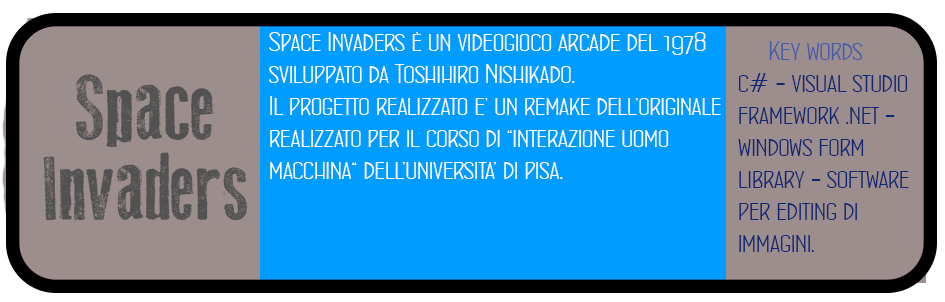
<style>
.page{position:relative;width:945px;height:302px;background:#009cff}
.page>*{position:absolute;margin:0}
.t1{font:26.7px "ConcursoItalianBTNWide";color:#ffffff}
.t2{font:26.7px "ConcursoItalianBTNWide";color:#112672}
.t3{font:26.7px "ConcursoItalianBTNWide";color:#455baa}
.t4{font:93.3px "OldPress";color:#525252}
.t5{font:80px "ConcursoItalianBTNWide";color:#525252}
</style>
<div class="page">
<p class="t1" style="left:269px;top:32px;width:452px;height:147px">Space Invaders è un videogioco arcade del 1978<br>sviluppato da Toshihiro Nishikado. <br>Il progetto realizzato e’ un remake dell’originale <br>realizzato per il corso di “interazione uomo <br>macchina“ dell’universita’ di pisa.</p>
<p class="t2" style="left:738px;top:41px;width:171px;height:211px"><span class="t3">     Key words<br></span>c# - visual studio<br>framework .net -<br>windows form <br>library - software <br>per editing di <br>immagini.</p>
<p class="t4" style="left:76px;top:74px;width:139px;height:74px"><span class="t5"> </span>Space</p>
<p class="t4" style="left:43px;top:152px;width:204px;height:69px">Invaders</p>
</div>
